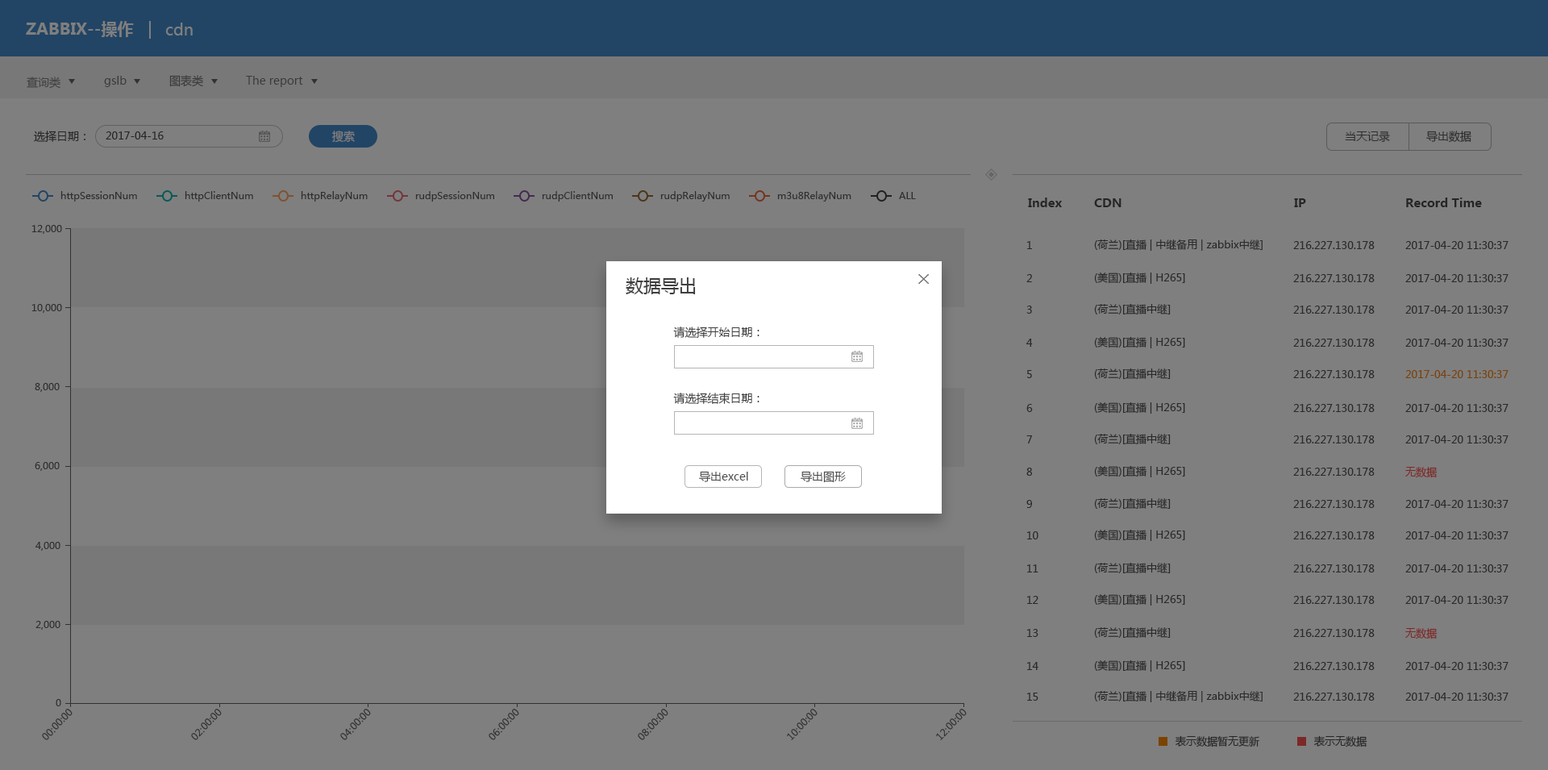
<style>
.page{position:relative;width:1548px;height:770px;background:#7f7f7f}
.page>*{position:absolute;margin:0}
.t1{font:16.1px "MicrosoftYaHei-Bold";color:#7f7f7f}
.t2{font:16.1px "MicrosoftYaHei";color:#7f7f7f}
.t3{font:11.3px "MicrosoftYaHei";color:#3b3b3b}
.t4{font:11.3px "MicrosoftYaHei";color:#3a3a3a}
.t5{font:11.3px "MicrosoftYaHei";color:#252525}
.t6{font:10.5px "MicrosoftYaHei";color:#252525}
.t7{font:11.3px "MicrosoftYaHei";color:#7f7f7f}
.t8{font:11.3px "MicrosoftYaHei";color:#2e2e2e}
.t9{font:9.7px "MicrosoftYaHei";color:#2e2e2e}
.t10{font:12.1px "MicrosoftYaHei-Bold";color:#252525}
.t11{font:10.5px "MicrosoftYaHei";color:#292929}
.t12{font:17.7px "MicrosoftYaHei";color:#3e3e3e}
.t13{font:11.3px "MicrosoftYaHei";color:#3e3e3e}
.t14{font:10.5px "MicrosoftYaHei";color:#7b4301}
.t15{font:11.3px "MicrosoftYaHei";color:#4a4a4a}
.t16{font:10.5px "MicrosoftYaHei";color:#7d2828}
</style>
<div class="page">
<p class="t1" style="left:26px;top:21px;width:108px;height:16px">ZABBIX--操作</p>
<p class="t2" style="left:165px;top:23px;width:28px;height:12px">cdn</p>
<p class="t3" style="left:27px;top:77px;width:33px;height:12px;opacity:0.7">查询类</p>
<p class="t4" style="left:104px;top:76px;width:23px;height:11px">gslb</p>
<p class="t4" style="left:169px;top:75px;width:34px;height:12px">图表类</p>
<p class="t4" style="left:246px;top:76px;width:57px;height:11px">The report</p>
<p class="t5" style="left:34px;top:131px;width:51px;height:11px">选择日期：</p>
<p class="t6" style="left:106px;top:131px;width:58px;height:9px">2017-04-16</p>
<p class="t7" style="left:332px;top:131px;width:23px;height:12px">搜索</p>
<p class="t8" style="left:1345px;top:131px;width:45px;height:11px">当天记录</p>
<p class="t8" style="left:1427px;top:131px;width:45px;height:12px">导出数据</p>
<p class="t9" style="left:60px;top:191px;width:77px;height:11px">httpSessionNum</p>
<p class="t9" style="left:185px;top:191px;width:68px;height:11px">httpClientNum</p>
<p class="t9" style="left:301px;top:191px;width:67px;height:11px">httpRelayNum</p>
<p class="t9" style="left:415px;top:191px;width:79px;height:11px">rudpSessionNum</p>
<p class="t9" style="left:542px;top:191px;width:71px;height:11px">rudpClientNum</p>
<p class="t9" style="left:660px;top:191px;width:70px;height:11px">rudpRelayNum</p>
<p class="t9" style="left:777px;top:191px;width:75px;height:11px">m3u8RelayNum</p>
<p class="t9" style="left:899px;top:192px;width:17px;height:7px">ALL</p>
<p class="t10" style="left:1028px;top:198px;width:34px;height:9px">Index</p>
<p class="t10" style="left:1406px;top:198px;width:76px;height:9px">Record Time</p>
<p class="t10" style="left:1094px;top:198px;width:28px;height:9px">CDN</p>
<p class="t10" style="left:1294px;top:198px;width:12px;height:9px">IP</p>
<p class="t9" style="left:31px;top:225px;width:31px;height:9px">12,000</p>
<p class="t11" style="left:1027px;top:241px;width:5px;height:8px">1</p>
<p class="t11" style="left:1094px;top:239px;width:169px;height:12px">(荷兰)[直播 | 中继备用 | zabbix中继]</p>
<p class="t11" style="left:1294px;top:241px;width:81px;height:8px">216.227.130.178</p>
<p class="t11" style="left:1406px;top:241px;width:103px;height:8px">2017-04-20 11:30:37</p>
<p class="t12" style="left:626px;top:277px;width:70px;height:17px">数据导出</p>
<p class="t11" style="left:1027px;top:274px;width:5px;height:8px">2</p>
<p class="t11" style="left:1094px;top:272px;width:91px;height:12px">(美国)[直播 | H265]</p>
<p class="t11" style="left:1294px;top:274px;width:81px;height:8px">216.227.130.178</p>
<p class="t11" style="left:1406px;top:274px;width:103px;height:8px">2017-04-20 11:30:37</p>
<p class="t9" style="left:31px;top:304px;width:31px;height:9px">10,000</p>
<p class="t11" style="left:1027px;top:306px;width:5px;height:8px">3</p>
<p class="t11" style="left:1094px;top:303px;width:77px;height:12px">(荷兰)[直播中继]</p>
<p class="t11" style="left:1294px;top:306px;width:81px;height:8px">216.227.130.178</p>
<p class="t11" style="left:1406px;top:306px;width:103px;height:8px">2017-04-20 11:30:37</p>
<p class="t13" style="left:673px;top:327px;width:87px;height:11px">请选择开始日期：</p>
<p class="t11" style="left:1027px;top:339px;width:6px;height:8px">4</p>
<p class="t11" style="left:1094px;top:336px;width:91px;height:12px">(美国)[直播 | H265]</p>
<p class="t11" style="left:1294px;top:339px;width:81px;height:8px">216.227.130.178</p>
<p class="t11" style="left:1406px;top:339px;width:103px;height:8px">2017-04-20 11:30:37</p>
<p class="t11" style="left:1027px;top:370px;width:5px;height:8px">5</p>
<p class="t11" style="left:1094px;top:368px;width:77px;height:11px">(荷兰)[直播中继]</p>
<p class="t11" style="left:1294px;top:370px;width:81px;height:8px">216.227.130.178</p>
<p class="t14" style="left:1406px;top:370px;width:103px;height:8px">2017-04-20 11:30:37</p>
<p class="t9" style="left:35px;top:383px;width:25px;height:9px">8,000</p>
<p class="t13" style="left:673px;top:393px;width:87px;height:11px">请选择结束日期：</p>
<p class="t11" style="left:1094px;top:402px;width:91px;height:12px">(美国)[直播 | H265]</p>
<p class="t11" style="left:1027px;top:404px;width:6px;height:8px">6</p>
<p class="t11" style="left:1294px;top:404px;width:81px;height:8px">216.227.130.178</p>
<p class="t11" style="left:1406px;top:404px;width:103px;height:8px">2017-04-20 11:30:37</p>
<p class="t11" style="left:1027px;top:435px;width:6px;height:9px">7</p>
<p class="t11" style="left:1094px;top:433px;width:77px;height:11px">(荷兰)[直播中继]</p>
<p class="t11" style="left:1294px;top:435px;width:81px;height:9px">216.227.130.178</p>
<p class="t11" style="left:1406px;top:435px;width:103px;height:9px">2017-04-20 11:30:37</p>
<p class="t9" style="left:35px;top:462px;width:25px;height:9px">6,000</p>
<p class="t15" style="left:699px;top:471px;width:49px;height:11px">导出excel</p>
<p class="t15" style="left:801px;top:471px;width:45px;height:12px">导出图形</p>
<p class="t11" style="left:1027px;top:468px;width:6px;height:8px">8</p>
<p class="t11" style="left:1094px;top:465px;width:91px;height:12px">(美国)[直播 | H265]</p>
<p class="t11" style="left:1294px;top:468px;width:81px;height:8px">216.227.130.178</p>
<p class="t16" style="left:1406px;top:467px;width:32px;height:11px">无数据</p>
<p class="t11" style="left:1094px;top:498px;width:77px;height:11px">(荷兰)[直播中继]</p>
<p class="t11" style="left:1027px;top:500px;width:5px;height:8px">9</p>
<p class="t11" style="left:1294px;top:500px;width:81px;height:8px">216.227.130.178</p>
<p class="t11" style="left:1406px;top:500px;width:103px;height:8px">2017-04-20 11:30:37</p>
<p class="t11" style="left:1027px;top:531px;width:12px;height:8px">10</p>
<p class="t11" style="left:1094px;top:529px;width:91px;height:12px">(美国)[直播 | H265]</p>
<p class="t11" style="left:1294px;top:531px;width:81px;height:8px">216.227.130.178</p>
<p class="t11" style="left:1406px;top:531px;width:103px;height:8px">2017-04-20 11:30:37</p>
<p class="t9" style="left:35px;top:542px;width:25px;height:9px">4,000</p>
<p class="t11" style="left:1027px;top:564px;width:12px;height:9px">11</p>
<p class="t11" style="left:1094px;top:562px;width:77px;height:11px">(荷兰)[直播中继]</p>
<p class="t11" style="left:1294px;top:564px;width:81px;height:9px">216.227.130.178</p>
<p class="t11" style="left:1406px;top:564px;width:103px;height:9px">2017-04-20 11:30:37</p>
<p class="t11" style="left:1094px;top:594px;width:91px;height:12px">(美国)[直播 | H265]</p>
<p class="t11" style="left:1027px;top:596px;width:12px;height:8px">12</p>
<p class="t11" style="left:1294px;top:596px;width:81px;height:8px">216.227.130.178</p>
<p class="t11" style="left:1406px;top:596px;width:103px;height:8px">2017-04-20 11:30:37</p>
<p class="t9" style="left:35px;top:621px;width:25px;height:9px">2,000</p>
<p class="t11" style="left:1027px;top:629px;width:12px;height:8px">13</p>
<p class="t11" style="left:1094px;top:627px;width:77px;height:11px">(荷兰)[直播中继]</p>
<p class="t11" style="left:1294px;top:629px;width:81px;height:8px">216.227.130.178</p>
<p class="t16" style="left:1406px;top:628px;width:32px;height:11px">无数据</p>
<p class="t11" style="left:1027px;top:662px;width:12px;height:8px">14</p>
<p class="t11" style="left:1094px;top:660px;width:91px;height:12px">(美国)[直播 | H265]</p>
<p class="t11" style="left:1294px;top:662px;width:81px;height:8px">216.227.130.178</p>
<p class="t11" style="left:1406px;top:662px;width:103px;height:8px">2017-04-20 11:30:37</p>
<p class="t9" style="left:56px;top:699px;width:5px;height:7px">0</p>
<p class="t11" style="left:1027px;top:693px;width:12px;height:8px">15</p>
<p class="t11" style="left:1094px;top:690px;width:169px;height:12px">(荷兰)[直播 | 中继备用 | zabbix中继]</p>
<p class="t11" style="left:1294px;top:693px;width:81px;height:8px">216.227.130.178</p>
<p class="t11" style="left:1406px;top:693px;width:103px;height:8px">2017-04-20 11:30:37</p>
<p class="t9" style="left:42px;top:709px;width:31px;height:31px;rotate:-46deg">00:00:00</p>
<p class="t9" style="left:191px;top:709px;width:31px;height:31px;rotate:-46deg">02:00:00</p>
<p class="t9" style="left:340px;top:709px;width:31px;height:31px;rotate:-46deg">04:00:00</p>
<p class="t9" style="left:489px;top:709px;width:30px;height:31px;rotate:-46deg">06:00:00</p>
<p class="t9" style="left:638px;top:709px;width:31px;height:31px;rotate:-46deg">08:00:00</p>
<p class="t9" style="left:787px;top:709px;width:31px;height:31px;rotate:-46deg">10:00:00</p>
<p class="t9" style="left:936px;top:709px;width:31px;height:31px;rotate:-46deg">12:00:00</p>
<p class="t6" style="left:1176px;top:735px;width:84px;height:13px">表示数据暂无更新</p>
<p class="t6" style="left:1314px;top:735px;width:54px;height:13px">表示无数据</p>
</div>
